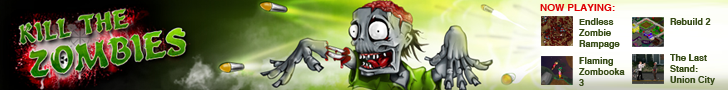
<style>
.page{position:relative;width:728px;height:90px}
.page>*{position:absolute;margin:0}
.t1{font:10px "Helvetica-Bold";color:#df0002}
.t2{font:9px "Helvetica-Bold";color:#394d19}
</style>
<div class="page">
<p class="t1" style="left:540px;top:4px;width:75px;height:7px">NOW PLAYING:</p>
<p class="t2" style="left:579px;top:18px;width:41px;height:31px">Endless<br>Zombie<br>Rampage</p>
<p class="t2" style="left:670px;top:18px;width:41px;height:7px">Rebuild 2</p>
<p class="t2" style="left:670px;top:54px;width:45px;height:31px">The Last<br>Stand:<br>Union City</p>
<p class="t2" style="left:579px;top:57px;width:46px;height:29px">Flaming<br>Zombooka<br>3</p>
</div>
